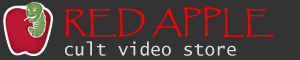
<style>
.page{position:relative;width:300px;height:60px;background:#333333}
.page>*{position:absolute;margin:0}
.t1{font:30px "Papyrus-Regular";color:#ff0000}
.t2{font:18px "LucidaSans-Typewriter";color:#dfdfdf}
</style>
<div class="page">
<p class="t1" style="left:65px;top:7px;width:209px;height:30px">RED APPLE</p>
<p class="t2" style="left:65px;top:41px;width:171px;height:15px">cult video store</p>
</div>
